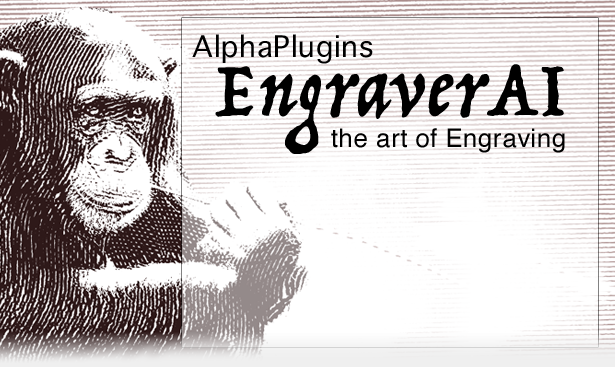
<style>
.page{position:relative;width:615px;height:367px;background:#ffffff}
.page>*{position:absolute;margin:0}
.t1{font:40.2px "AppleSymbols";letter-spacing:0.02em;color:#000000}
.t2{font:86.3px "Trattatello";letter-spacing:0.02em;color:#000000}
.t3{font:25.7px "Helvetica";letter-spacing:0.02em;color:#000000}
</style>
<div class="page">
<p class="t1" style="left:192px;top:34px;width:181px;height:30px">AlphaPlugins</p>
<p class="t2" style="left:215px;top:64px;width:349px;height:90px">EngraverAI</p>
<p class="t3" style="left:331px;top:128px;width:234px;height:25px">the art of Engraving</p>
</div>
